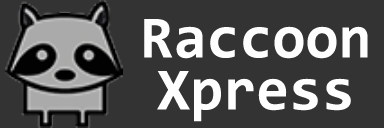
<style>
.page{position:relative;width:384px;height:128px;background:#333333}
.page>*{position:absolute;margin:0}
.t1{font:60px/24px "Consolas-Bold";color:#fefefe}
</style>
<div class="page">
<p class="t1" style="left:144px;top:19px;width:224px;height:103px;text-align:center">Raccoon<br>Xpress</p>
</div>
